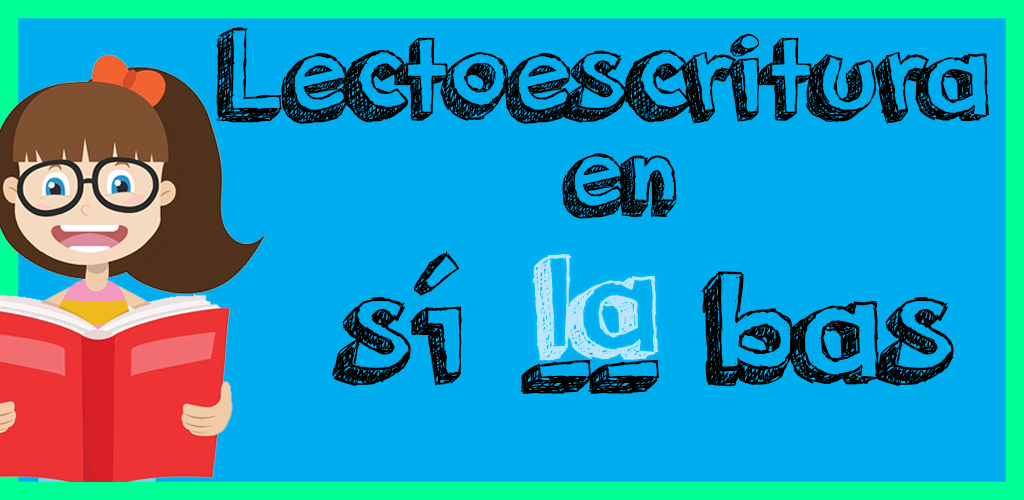
<style>
.page{position:relative;width:1024px;height:500px;background:#00aeef}
.page>*{position:absolute;margin:0}
.t1{font:130px "orangejuice";color:#000000}
.t2{font:120px "orangejuice";color:#000000}
.t3{font:160px "orangejuice";color:#000000}
.t4{font:160px "orangejuice";color:#bae5fa}
</style>
<div class="page">
<p class="t1" style="left:216px;top:27px;width:774px;height:97px">Lectoescritura</p>
<p class="t2" style="left:562px;top:153px;width:115px;height:66px">en</p>
<p class="t3" style="left:332px;top:251px;width:622px;height:136px">sí         bas</p>
<p class="t4" style="left:532px;top:254px;width:127px;height:107px">la</p>
<p class="t3" style="left:520px;top:359px;width:140px;height:35px">__</p>
</div>
